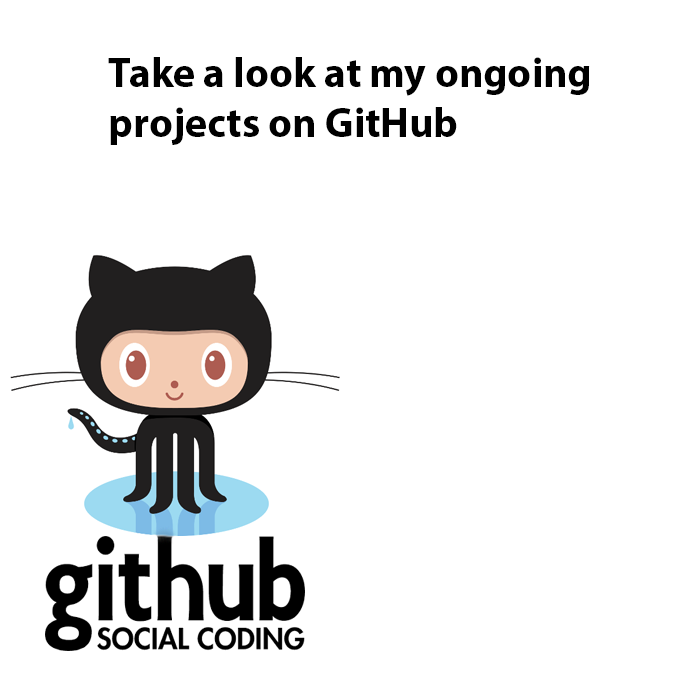
<style>
.page{position:relative;width:700px;height:700px;background:#ffffff}
.page>*{position:absolute;margin:0}
.t1{font:41.7px "MyriadPro-Bold";color:#000000}
</style>
<div class="page">
<p class="t1" style="left:108px;top:57px;width:482px;height:88px">Take a look at my ongoing<br>projects on GitHub</p>
</div>
